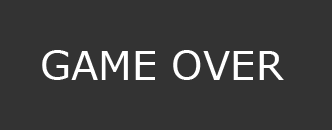
<style>
.page{position:relative;width:332px;height:130px;background:#333333}
.page>*{position:absolute;margin:0}
.t1{font:40px "Verdana";color:#ffffff}
</style>
<div class="page">
<p class="t1" style="left:42px;top:50px;width:242px;height:30px">GAME OVER</p>
</div>
